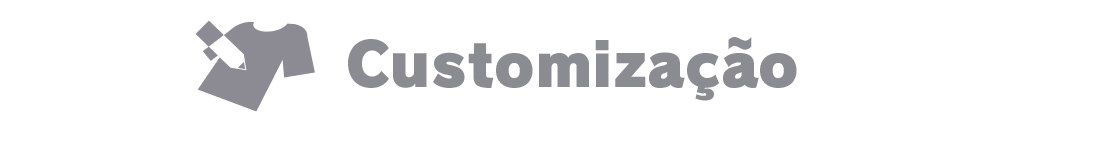
<style>
.page{position:relative;width:1110px;height:144px;background:#ffffff}
.page>*{position:absolute;margin:0}
.t1{font:60px "RodinPro-UB";letter-spacing:0.001em;color:#8b8c92}
</style>
<div class="page">
<p class="t1" style="left:348px;top:37px;width:449px;height:64px">Customização</p>
</div>
